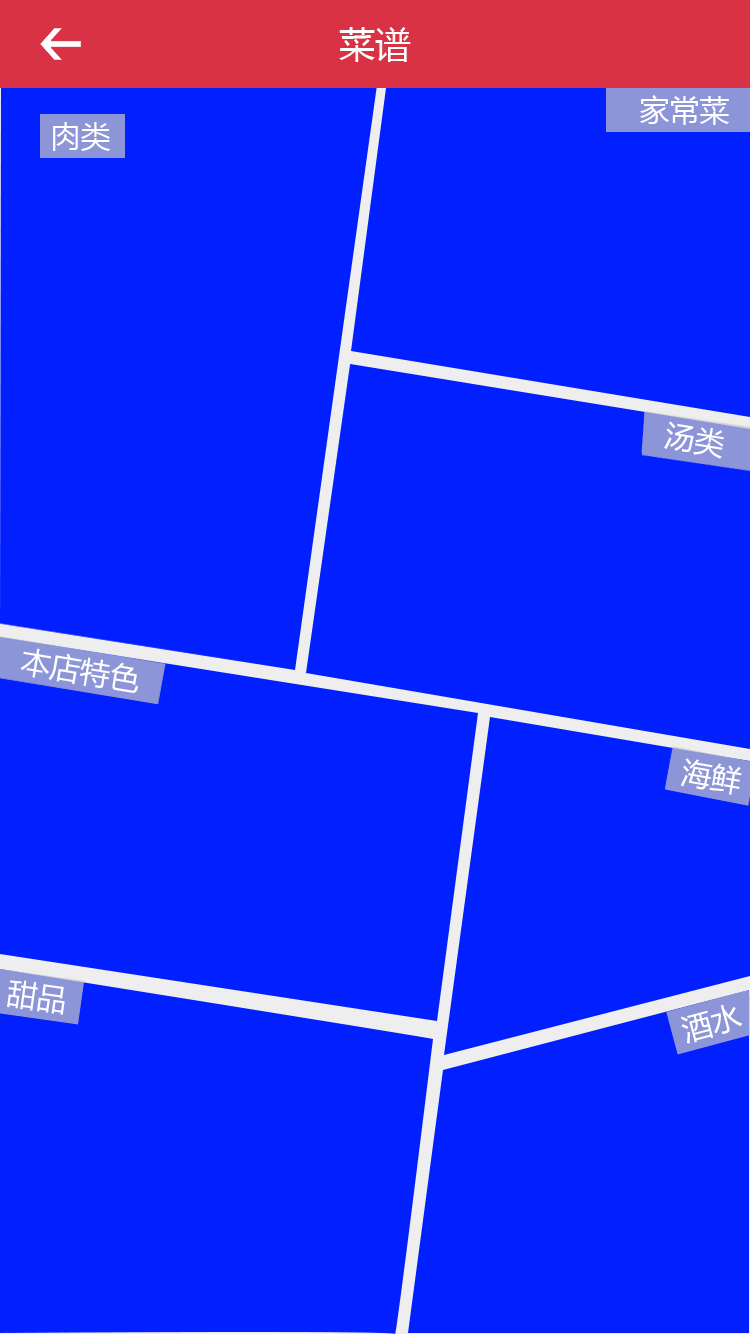
<style>
.page{position:relative;width:750px;height:1334px;background:#011fff}
.page>*{position:absolute;margin:0}
.t1{font:36px "MicrosoftYaHei";color:#ffffff}
.t2{font:30px "MicrosoftYaHei";color:#ffffff}
</style>
<div class="page">
<p class="t1" style="left:339px;top:27px;width:72px;height:35px">菜谱</p>
<p class="t2" style="left:640px;top:95px;width:89px;height:30px">家常菜</p>
<p class="t2" style="left:53px;top:122px;width:57px;height:29px">肉类</p>
<p class="t2" style="left:664px;top:421px;width:60px;height:38px;rotate:9deg">汤类</p>
<p class="t2" style="left:20px;top:648px;width:118px;height:45px;rotate:10deg">本店特色</p>
<p class="t2" style="left:680px;top:758px;width:62px;height:37px;rotate:10deg">海鲜</p>
<p class="t2" style="left:7px;top:980px;width:58px;height:35px;rotate:8deg">甜品</p>
<p class="t2" style="left:681px;top:1004px;width:62px;height:40px;rotate:-15deg">酒水</p>
</div>
